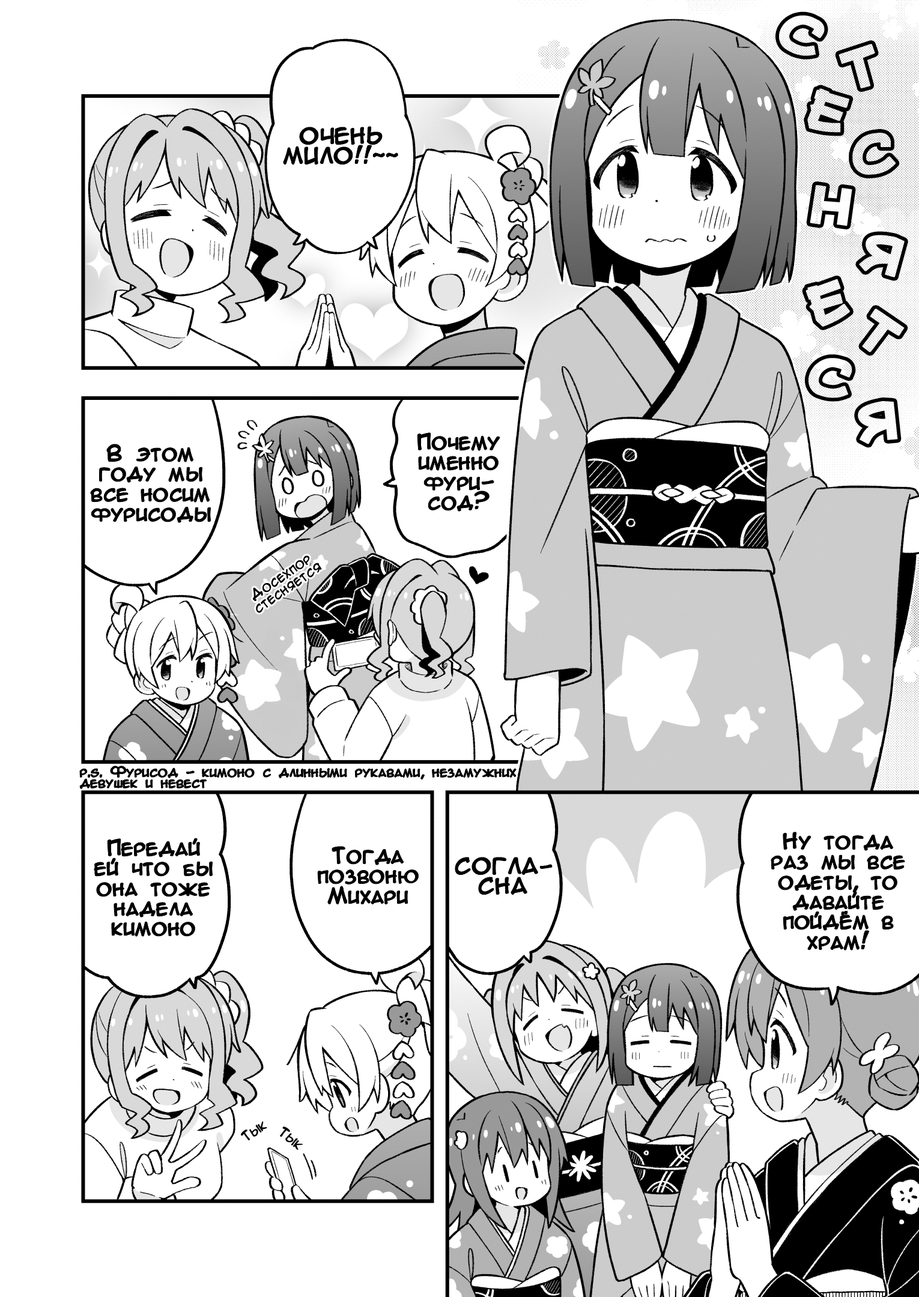
<style>
.page{position:relative;width:919px;height:1297px;background:#ffffff}
.page>*{position:absolute;margin:0}
.t1{font:45.1px "Mauryssel-Bold";color:#ffffff;font-weight:bold}
.t2{font:45.1px "Mauryssel-Bold";color:#f6f6f6;font-weight:bold}
.t3{font:20px/20px "AnimeAcev3";color:#000000;font-weight:bold}
.t4{font:45.1px "Mauryssel-Bold";color:#f4f4f4;font-weight:bold}
.t5{font:45.1px "Mauryssel-Bold";color:#fefefe;font-weight:bold}
.t6{font:12.5px/12.5px "AnimeAcev3";color:#000000;font-weight:bold}
.t7{font:12.5px/11px "AnimeAcev3";color:#000000;font-weight:bold}
.t8{font:12.5px "AnimeAcev3";color:#000000;font-weight:bold}
</style>
<div class="page">
<p class="t1" style="left:779px;top:15px;width:46px;height:41px;rotate:30deg">c</p>
<p class="t1" style="left:839px;top:44px;width:36px;height:44px;rotate:-14deg">т</p>
<p class="t2" style="left:807px;top:88px;width:43px;height:45px;rotate:17deg">е</p>
<p class="t3" style="left:284px;top:127px;width:114px;height:38px;text-align:center">ОЧЕНЬ<br>МИЛО!!~~</p>
<p class="t4" style="left:852px;top:133px;width:44px;height:42px;rotate:-3deg">с</p>
<p class="t5" style="left:810px;top:185px;width:42px;height:41px;rotate:8deg">н</p>
<p class="t1" style="left:859px;top:235px;width:46px;height:43px;rotate:21deg">я</p>
<p class="t1" style="left:806px;top:279px;width:44px;height:48px;rotate:-19deg">е</p>
<p class="t1" style="left:862px;top:309px;width:43px;height:44px;rotate:39deg">т</p>
<p class="t1" style="left:809px;top:358px;width:43px;height:40px;rotate:19deg">с</p>
<p class="t1" style="left:858px;top:401px;width:40px;height:44px">я</p>
<p class="t3" style="left:417px;top:433px;width:83px;height:78px;text-align:center">Почему<br>именно<br>фури-<br>сод?</p>
<p class="t3" style="left:91px;top:445px;width:120px;height:78px;text-align:center">В этом<br>году мы<br>все носим<br>фурисоды</p>
<p class="t6" style="left:253px;top:556px;width:69px;height:57px;text-align:center;rotate:-35deg">Досехпор<br>стесняется</p>
<p class="t7" style="left:80px;top:766px;width:436px;height:23px">p.s. Фурисод - кимоно с длинными рукавами, незамужних<br>девушек и невест</p>
<p class="t3" style="left:771px;top:833px;width:134px;height:117px;text-align:center">Ну тогда<br>раз мы все<br>одеты, то<br>давайте<br>пойдём в<br>храм!</p>
<p class="t3" style="left:94px;top:839px;width:119px;height:97px;text-align:center">Передай<br>ей что бы<br>она тоже<br>надела<br>кимоно</p>
<p class="t3" style="left:318px;top:847px;width:101px;height:58px;text-align:center">Тогда<br>позвоню<br>Михари</p>
<p class="t3" style="left:455px;top:858px;width:97px;height:37px;text-align:center">СОГЛА-<br>СНА</p>
<p class="t8" style="left:241px;top:1121px;width:26px;height:20px;rotate:-35deg">Тык</p>
<p class="t8" style="left:280px;top:1127px;width:23px;height:23px;rotate:40deg">Тык</p>
</div>
